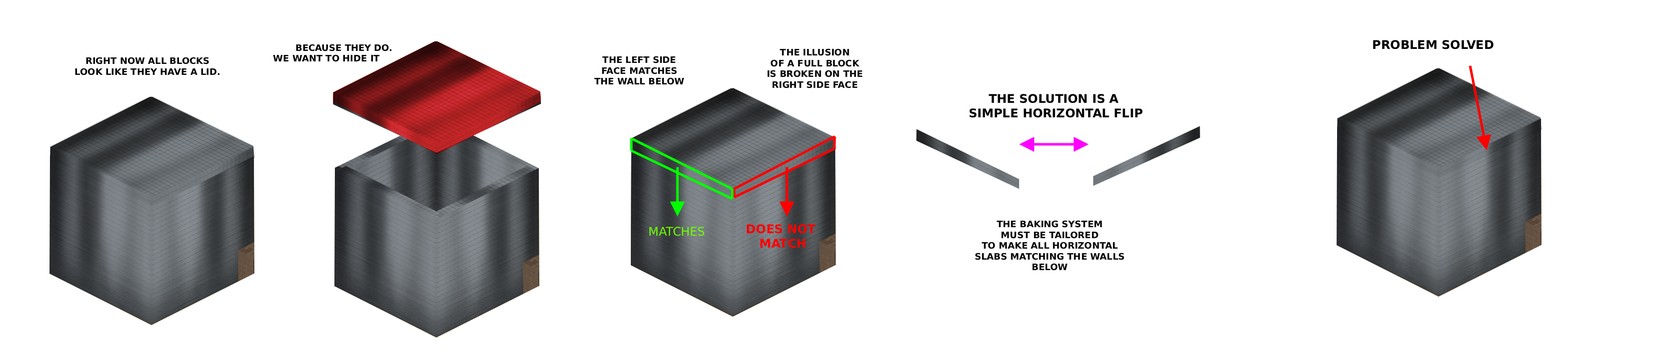
<style>
.page{position:relative;width:1678px;height:354px;background:#ffffff}
.page>*{position:absolute;margin:0}
.t1{font:12px "DejaVuSans-Bold";color:#000000}
.t2{font:9px "DejaVuSans-Bold";color:#000000}
.t3{font:12px "DejaVuSans";color:#6cff00}
.t4{font:12px "DejaVuSans-Bold";color:#ff0000}
</style>
<div class="page">
<p class="t1" style="left:1374px;top:40px;width:120px;height:10px">PROBLEM SOLVED</p>
<p class="t2" style="left:296px;top:44px;width:96px;height:8px">BECAUSE THEY DO.</p>
<p class="t2" style="left:768px;top:48px;width:94px;height:40px;text-align:center">THE ILLUSION<br>OF A FULL BLOCK<br>IS BROKEN ON THE<br>RIGHT SIDE FACE</p>
<p class="t2" style="left:75px;top:57px;width:145px;height:19px;text-align:center">RIGHT NOW ALL BLOCKS<br>LOOK LIKE THEY HAVE A LID.</p>
<p class="t2" style="left:273px;top:54px;width:107px;height:8px">WE WANT TO HIDE IT</p>
<p class="t2" style="left:594px;top:56px;width:90px;height:29px;text-align:center">THE LEFT SIDE<br>FACE MATCHES<br>THE WALL BELOW</p>
<p class="t1" style="left:970px;top:94px;width:173px;height:24px;text-align:center">THE SOLUTION IS A <br>SIMPLE HORIZONTAL FLIP</p>
<p class="t2" style="left:976px;top:220px;width:148px;height:51px;text-align:center">THE BAKING SYSTEM<br>MUST BE TAILORED<br>TO MAKE ALL HORIZONTAL<br>SLABS MATCHING THE WALLS<br>BELOW</p>
<p class="t3" style="left:650px;top:227px;width:54px;height:9px">MATCHES</p>
<p class="t4" style="left:747px;top:224px;width:69px;height:24px;text-align:center">DOES NOT <br>MATCH</p>
</div>
